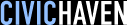
<style>
.page{position:relative;width:127px;height:25px;background:#000000}
.page>*{position:absolute;margin:0}
.t1{font:34px "DINCondensedC";color:#92c0ff}
.t2{font:34px "DINCondensedC";color:#ffffff}
</style>
<div class="page">
<p class="t1" style="left:0px;top:0px;width:127px;height:25px">CIVIC<span class="t2">HAVEN</span></p>
</div>
